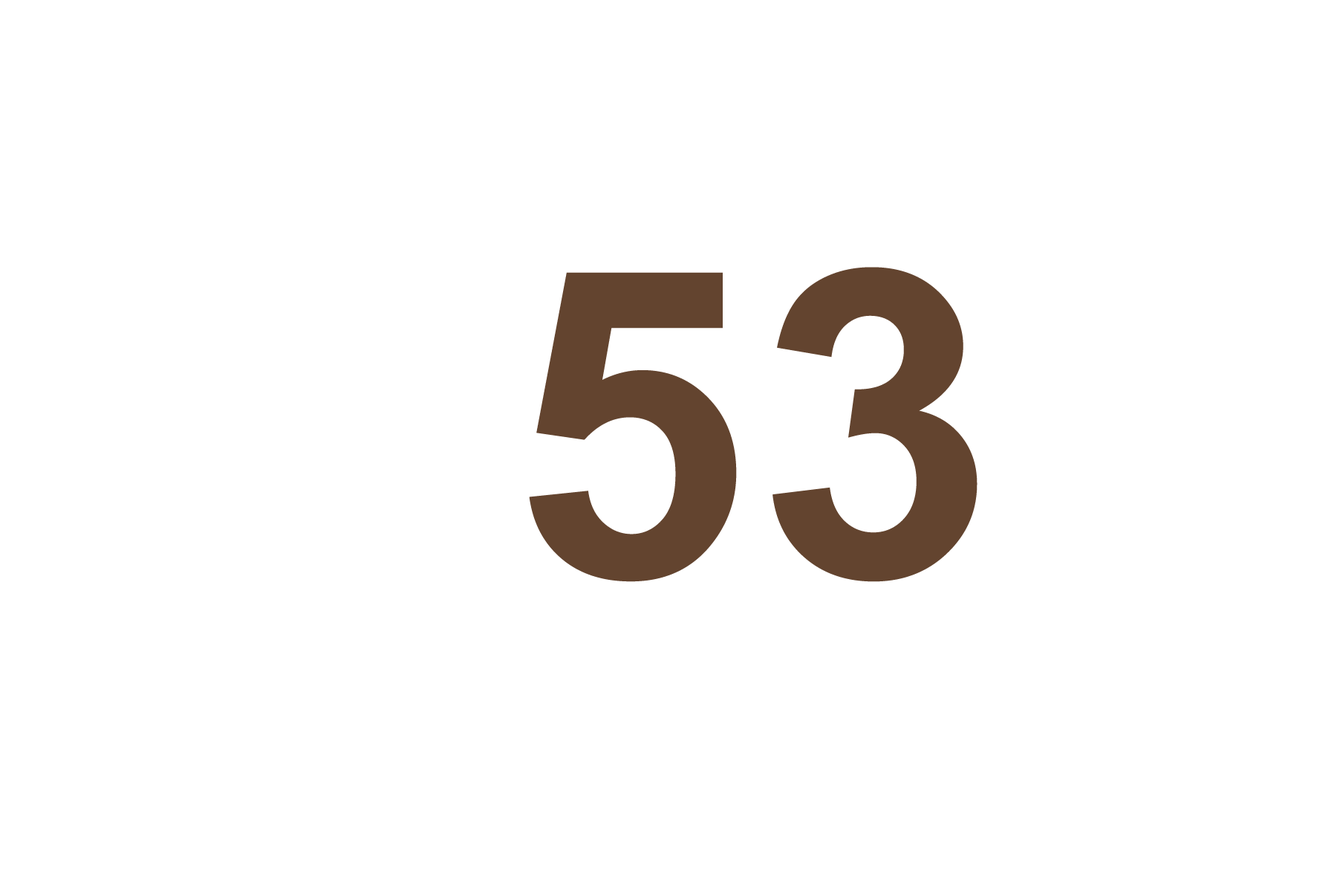
<style>
.page{position:relative;width:1337px;height:892px;background:#ffffff}
.page>*{position:absolute;margin:0}
.t1{font:429.6px "Arial-BoldMT";color:#63442f}
</style>
<div class="page">
<p class="t1" style="left:529px;top:267px;width:449px;height:315px">53</p>
</div>
